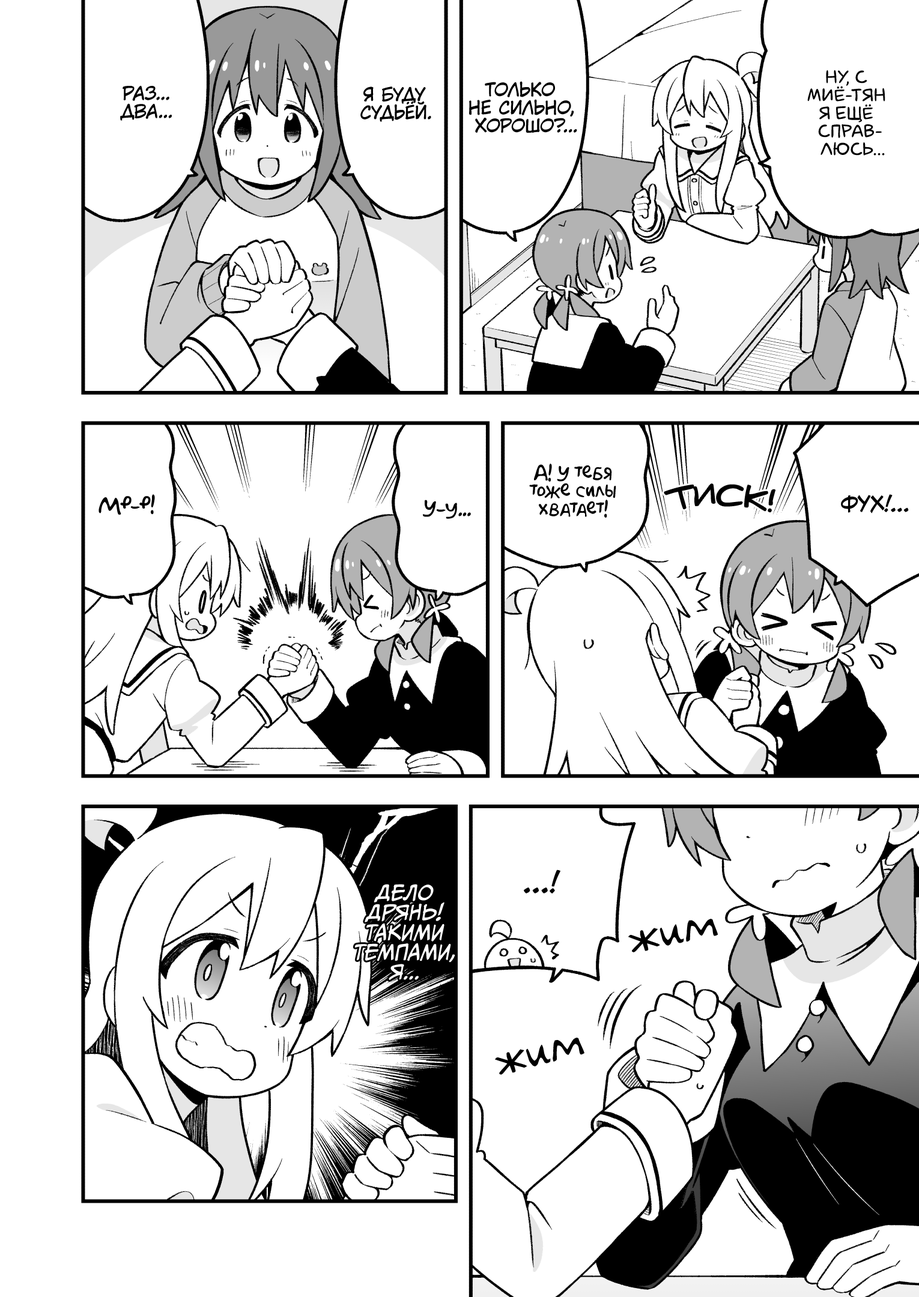
<style>
.page{position:relative;width:919px;height:1297px;background:#ffffff}
.page>*{position:absolute;margin:0}
.t1{font:18px "laCartoonerie";color:#000000;text-transform:uppercase}
.t2{font:18px "KuraiVoice2";color:#000000;text-transform:uppercase}
.t3{font:18px "AkbarPlain";color:#000000}
.t4{font:28.8px "v_Augie";color:#000000;text-transform:uppercase;scale:1.1 1}
.t5{font:19.8px "AkbarPlain";color:#000000}
.t6{font:21.6px "v_CCJeffCampbell";color:#000000;text-transform:uppercase}
.t7{font:19.8px "v_CCJeffCampbell";color:#000000;text-transform:uppercase}
.t8{font:27px "v_CCJeffCampbell";color:#000000;text-transform:uppercase}
.t9{font:28.8px "v_CCJeffCampbell";color:#000000;text-transform:uppercase}
.t10{font:19.8px "CCMeanwhile";color:#ffffff;text-transform:uppercase;font-style:italic}
.t11{font:43.2px "v_Augie";color:#000000}
</style>
<div class="page">
<p class="t1" style="left:807px;top:70px;width:78px;height:86px;text-align:center">Ну, с<br>Миё-тян<br>я ещё<br>справ-<br>люсь...</p>
<p class="t2" style="left:120px;top:85px;width:52px;height:36px;text-align:center">Раз...<br>Два...</p>
<p class="t2" style="left:360px;top:86px;width:71px;height:36px;text-align:center">Я буду<br>судьёй.</p>
<p class="t2" style="left:469px;top:81px;width:108px;height:52px;text-align:center">Только<br>не сильно,<br>хорошо?...</p>
<p class="t3" style="left:529px;top:464px;width:87px;height:54px;text-align:center">А! У тебя<br>тоже силы<br>хватает!</p>
<p class="t4" style="left:664px;top:484px;width:111px;height:28px">тиск!</p>
<p class="t5" style="left:99px;top:494px;width:56px;height:21px">Мр-р!</p>
<p class="t6" style="left:841px;top:494px;width:68px;height:20px">Фух!<span class="t7">...</span></p>
<p class="t5" style="left:423px;top:500px;width:48px;height:19px">У-у...</p>
<p class="t8" style="left:524px;top:870px;width:36px;height:24px">...<span class="t9">!</span></p>
<p class="t10" style="left:354px;top:884px;width:101px;height:96px;text-align:center">Дело<br>дрянь!<br>Такими<br>темпами,<br>я...</p>
<p class="t11" style="left:628px;top:919px;width:90px;height:34px;rotate:-12deg">жим</p>
<p class="t11" style="left:495px;top:1038px;width:89px;height:37px;rotate:-15deg">жим</p>
</div>
